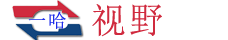
<style>
.page{position:relative;width:228px;height:40px;background:#ffffff}
.page>*{position:absolute;margin:0}
.t1{font:35.5px "SimSun";letter-spacing:0.1em;color:#d02a3e}
.t2{font:18.9px "SimSun";letter-spacing:0.1em;color:#1c2be9}
</style>
<div class="page">
<p class="t1" style="left:92px;top:4px;width:70px;height:33px">视野</p>
<p class="t2" style="left:28px;top:11px;width:38px;height:18px">一哈</p>
</div>
